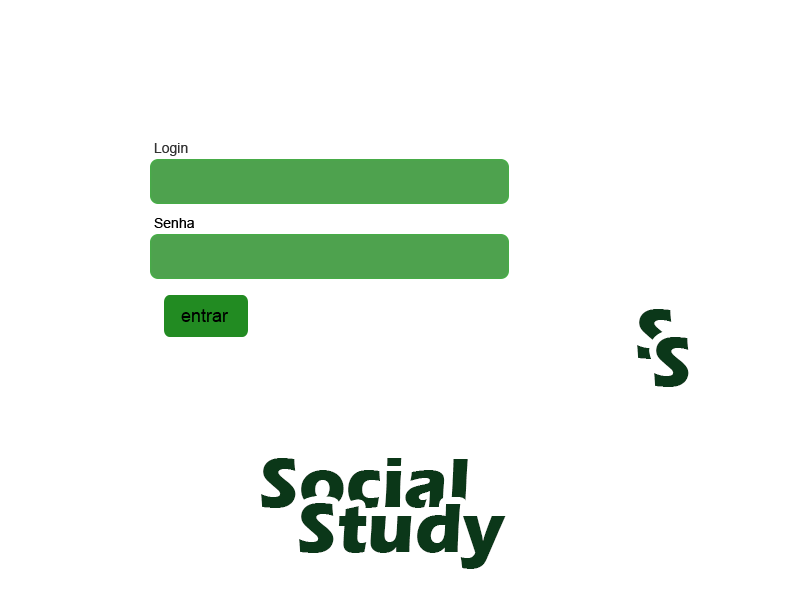
<style>
.page{position:relative;width:800px;height:600px;background:#ffffff}
.page>*{position:absolute;margin:0}
.t1{font:14px "ArialMT";color:#333333}
.t2{font:14px "ArialMT";color:#000000}
.t3{font:18px "ArialMT";color:#000000}
.t4{font:72px "ErasITC-Bold";color:#0b3719}
.t5{font:72px "ErasITC-Bold";color:#0b3718}
</style>
<div class="page">
<p class="t1" style="left:154px;top:143px;width:34px;height:13px">Login</p>
<p class="t2" style="left:154px;top:218px;width:40px;height:10px">Senha</p>
<p class="t3" style="left:181px;top:309px;width:48px;height:13px">entrar</p>
<p class="t4" style="left:637px;top:309px;width:35px;height:50px">S</p>
<p class="t4" style="left:654px;top:337px;width:35px;height:50px">S</p>
<p class="t5" style="left:261px;top:458px;width:207px;height:50px">Social</p>
<p class="t4" style="left:299px;top:503px;width:207px;height:66px">Study</p>
</div>
